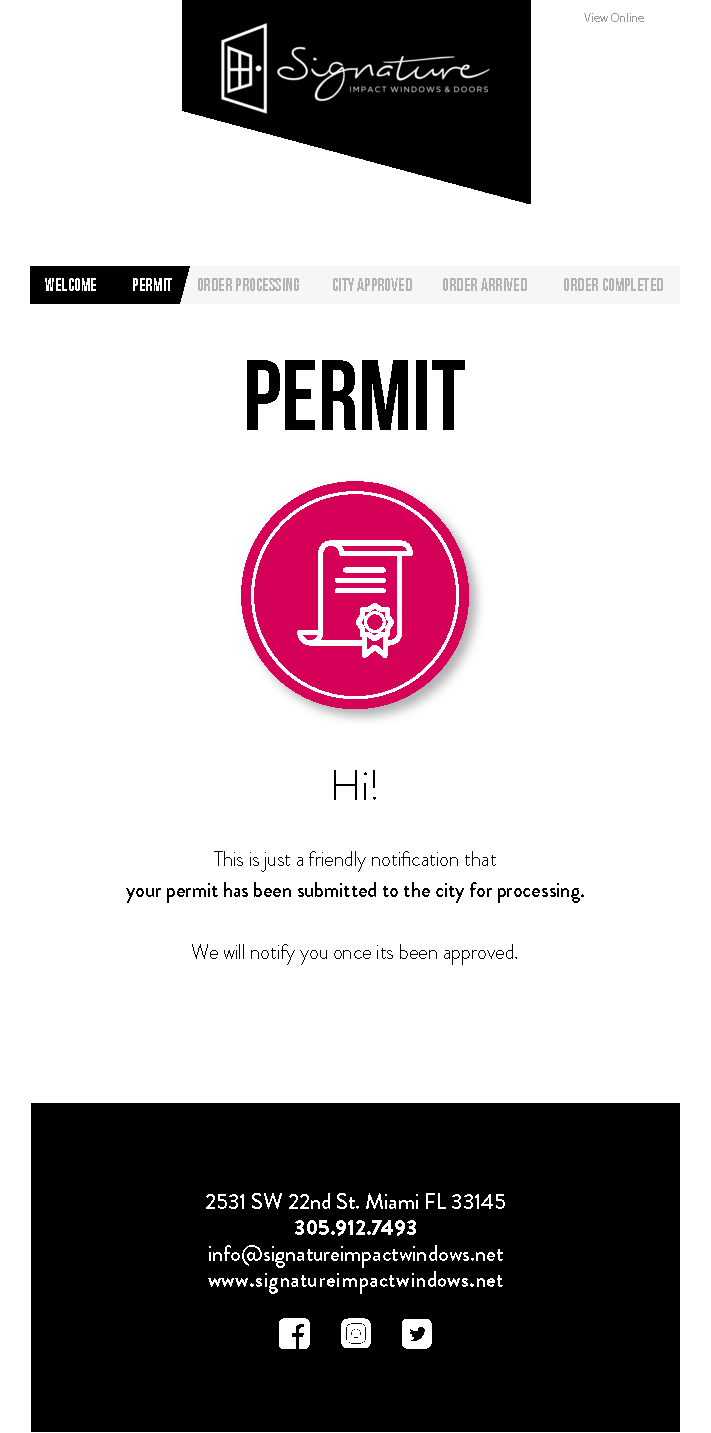
<style>
.page{position:relative;width:711px;height:1433px;background:#ffffff}
.page>*{position:absolute;margin:0}
.t1{font:12px "MyriadPro-Regular";color:#999999}
.t2{font:100px "BebasNeueBold";color:#000000}
.t3{font:41.8px "BrandonGrotesque-Light";color:#000000}
.t4{font:21px/31px "BrandonGrotesque-Medium";color:#000000;scale:0.97 1}
.t5{font:21px/31px "BrandonGrotesque-Light";color:#000000;scale:0.97 1}
.t6{font:22px/26px "BrandonGrotesque-Medium";color:#ffffff}
.t7{font:22px/26px "BrandonGrotesque-Black";color:#ffffff}
.t8{font:22px/26px "BrandonGrotesque-Bold";letter-spacing:0.015em;color:#ffffff}
</style>
<div class="page">
<p class="t1" style="left:584px;top:13px;width:60px;height:9px">View Online</p>
<p class="t2" style="left:247px;top:360px;width:218px;height:70px">PERMIT</p>
<p class="t3" style="left:334px;top:770px;width:42px;height:30px">Hi!</p>
<p class="t4" style="left:126px;top:851px;width:458px;height:114px;text-align:center"><span class="t5">This is just a friendly notification that<br></span>your permit has been submitted to the city for processing.<br><br><span class="t5">We will notify you once its been approved.</span></p>
<p class="t6" style="left:206px;top:1193px;width:299px;height:101px;text-align:center">2531 SW 22nd St. Miami FL 33145<br><span class="t7">305.912.7493<br></span>info@signatureimpactwindows.net<br><span class="t8">www.signatureimpactwindows.net</span></p>
</div>
